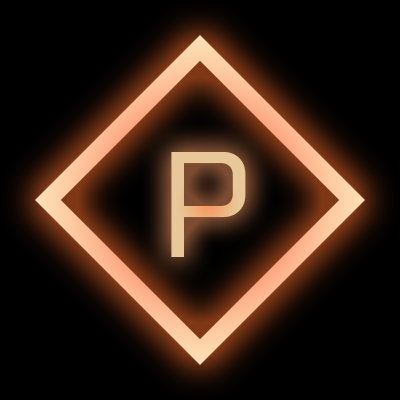
<style>
.page{position:relative;width:400px;height:400px;background:#000000}
.page>*{position:absolute;margin:0}
.t1{font:150px "Purista";color:#e8c798}
</style>
<div class="page">
<p class="t1" style="left:171px;top:152px;width:75px;height:105px">P</p>
</div>
